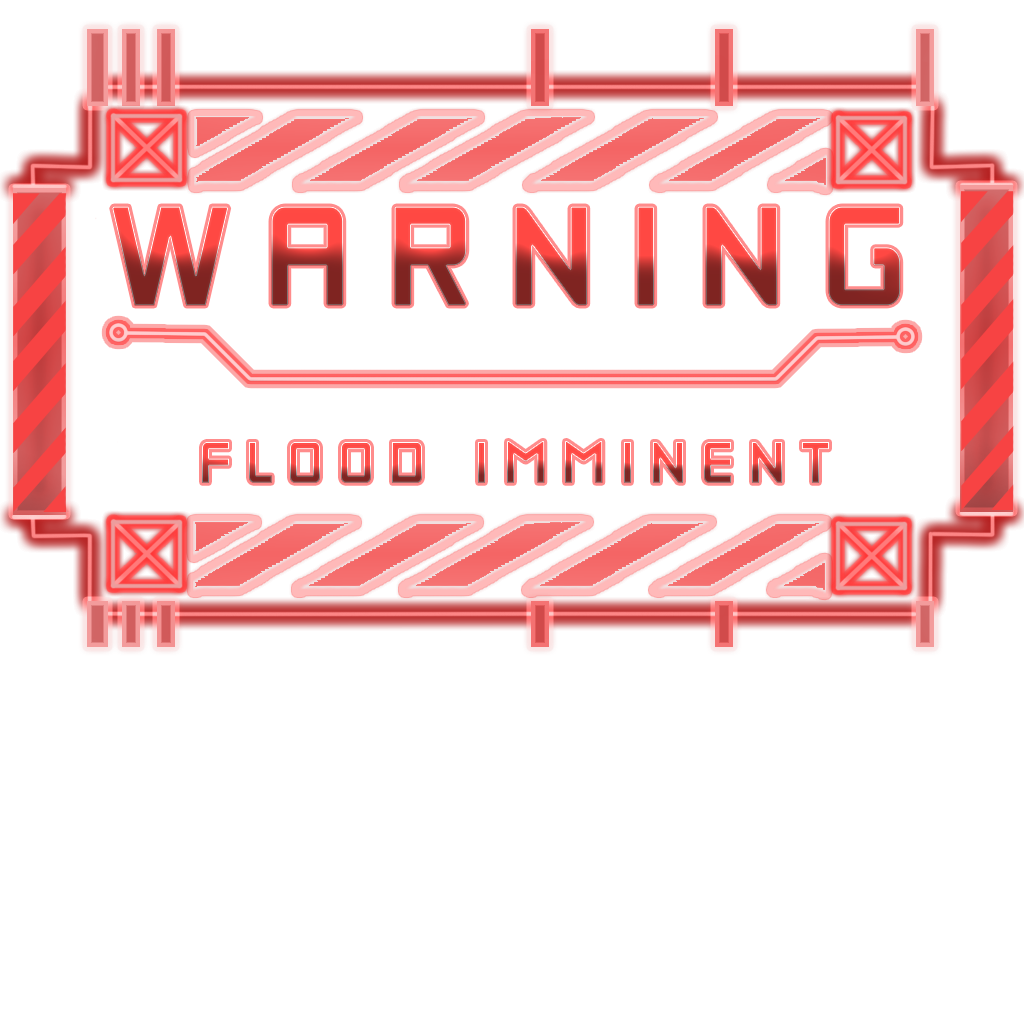
<style>
.page{position:relative;width:1024px;height:1024px;background:#ffffff}
.page>*{position:absolute;margin:0}
.t1{font:119.1px "SafetyMedium";letter-spacing:0.34em;font-weight:bold;scale:0.9 1}
.t2{font:50px "SafetyMedium";letter-spacing:0.34em;font-weight:bold;scale:0.9 1}
</style>
<div class="page">
<p class="t1" style="left:112px;top:206px;width:789px;height:100px">WARNING</p>
<p class="t2" style="left:202px;top:441px;width:627px;height:42px">FLOOD IMMINENT</p>
</div>
